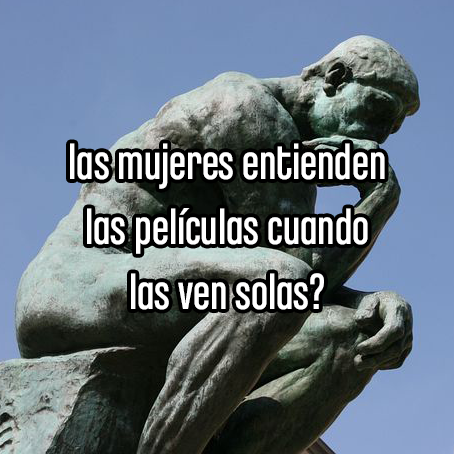
<style>
.page{position:relative;width:454px;height:454px}
.page>*{position:absolute;margin:0}
.t1{font:51.2px "ChaletComprime-CologneEighty";color:#ffffff}
</style>
<div class="page">
<p class="t1" style="left:70px;top:143px;width:315px;height:167px;text-align:center">las mujeres entienden<br>las películas cuando<br>las ven solas?</p>
</div>
